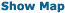
<style>
.page{position:relative;width:65px;height:13px;background:#ffffff}
.page>*{position:absolute;margin:0}
.t1{font:11.1px "Verdana-Bold";color:#0f628b}
</style>
<div class="page">
<p class="t1" style="left:1px;top:1px;width:64px;height:12px">Show Map</p>
</div>
